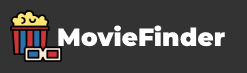
<style>
.page{position:relative;width:247px;height:73px;background:#333333}
.page>*{position:absolute;margin:0}
.t1{font:25px "Montserrat-Black";color:#ffffff}
</style>
<div class="page">
<p class="t1" style="left:58px;top:25px;width:167px;height:22px">MovieFinder</p>
</div>
